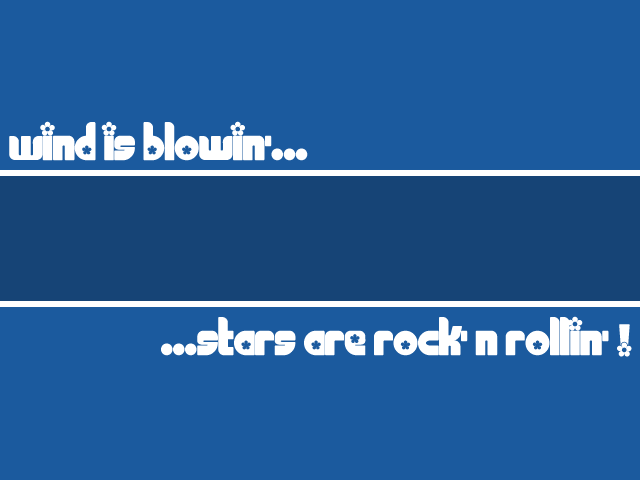
<style>
.page{position:relative;width:640px;height:480px;background:#1b5a9e}
.page>*{position:absolute;margin:0}
.t1{font:48px "Chick";color:#ffffff}
</style>
<div class="page">
<p class="t1" style="left:9px;top:121px;width:299px;height:40px">Wind is blowin’...</p>
<p class="t1" style="left:161px;top:316px;width:471px;height:41px">...stars are rock’ n rollin’ !</p>
</div>
